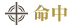
<style>
.page{position:relative;width:69px;height:27px;background:#ffffff}
.page>*{position:absolute;margin:0}
.t1{font:18px "RyuminPro-Heavy";color:#ae9442}
</style>
<div class="page">
<p class="t1" style="left:33px;top:4px;width:35px;height:18px">命中</p>
</div>
